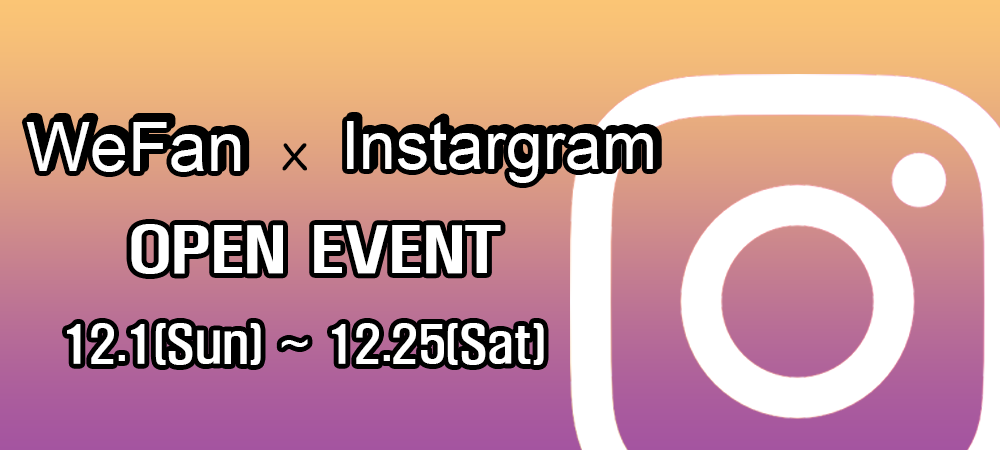
<style>
.page{position:relative;width:1000px;height:450px}
.page>*{position:absolute;margin:0}
.t1{font:67.9px "ArialMT";color:#ffffff}
.t2{font:66.1px "ArialMT";color:#ffffff}
.t3{font:56.7px "MDGaesung";color:#000000}
.t4{font:56.6px "H2hdrM";color:#ffffff;scale:1.29 1}
.t5{font:46.8px "H2hdrM";color:#ffffff}
</style>
<div class="page">
<p class="t1" style="left:26px;top:122px;width:215px;height:50px">WeFan</p>
<p class="t2" style="left:347px;top:121px;width:306px;height:62px">Instargram</p>
<p class="t3" style="left:282px;top:143px;width:25px;height:28px">x</p>
<p class="t4" style="left:131px;top:224px;width:370px;height:50px">OPEN EVENT</p>
<p class="t5" style="left:67px;top:323px;width:477px;height:42px">12.1(Sun) ~ 12.25(Sat)</p>
</div>
